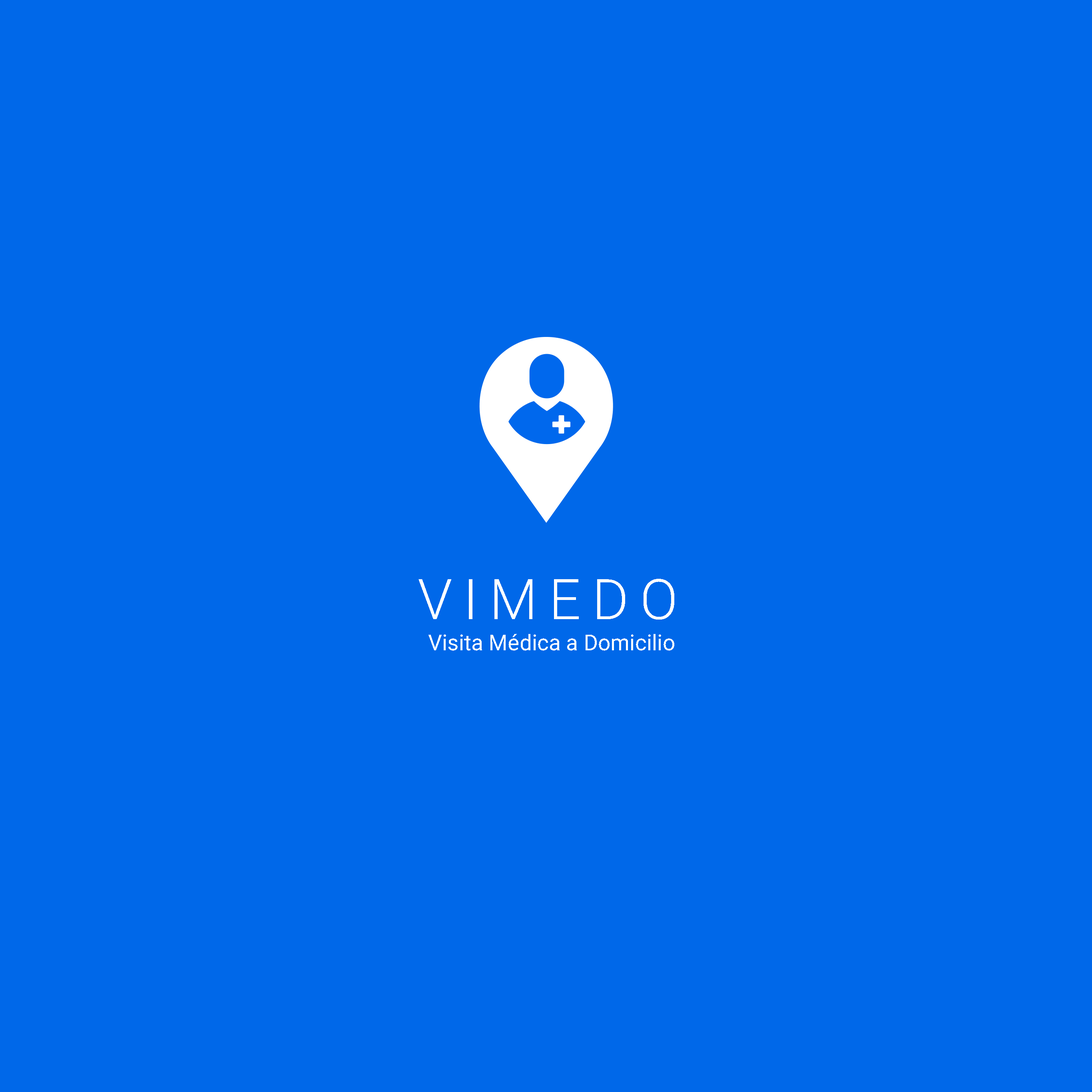
<style>
.page{position:relative;width:1092px;height:1092px;background:#0068e9}
.page>*{position:absolute;margin:0}
.t1{font:56px "Roboto-Light";letter-spacing:0.2em;color:#ffffff}
.t2{font:22px "Roboto-Regular";color:#ffffff}
</style>
<div class="page">
<p class="t1" style="left:418px;top:579px;width:256px;height:41px">VIMEDO</p>
<p class="t2" style="left:428px;top:634px;width:246px;height:17px">Visita Médica a Domicilio</p>
</div>
